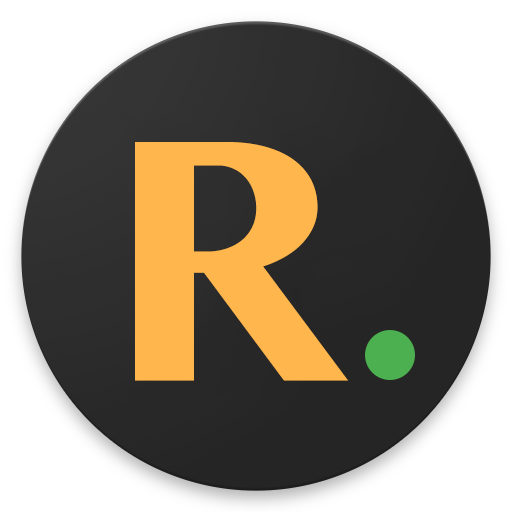
<style>
.page{position:relative;width:512px;height:512px;background:#ffffff}
.page>*{position:absolute;margin:0}
.t1{font:360px "MalayalamMN-Bold";color:#ffb74d}
</style>
<div class="page">
<p class="t1" style="left:135px;top:142px;width:213px;height:239px">R</p>
</div>
